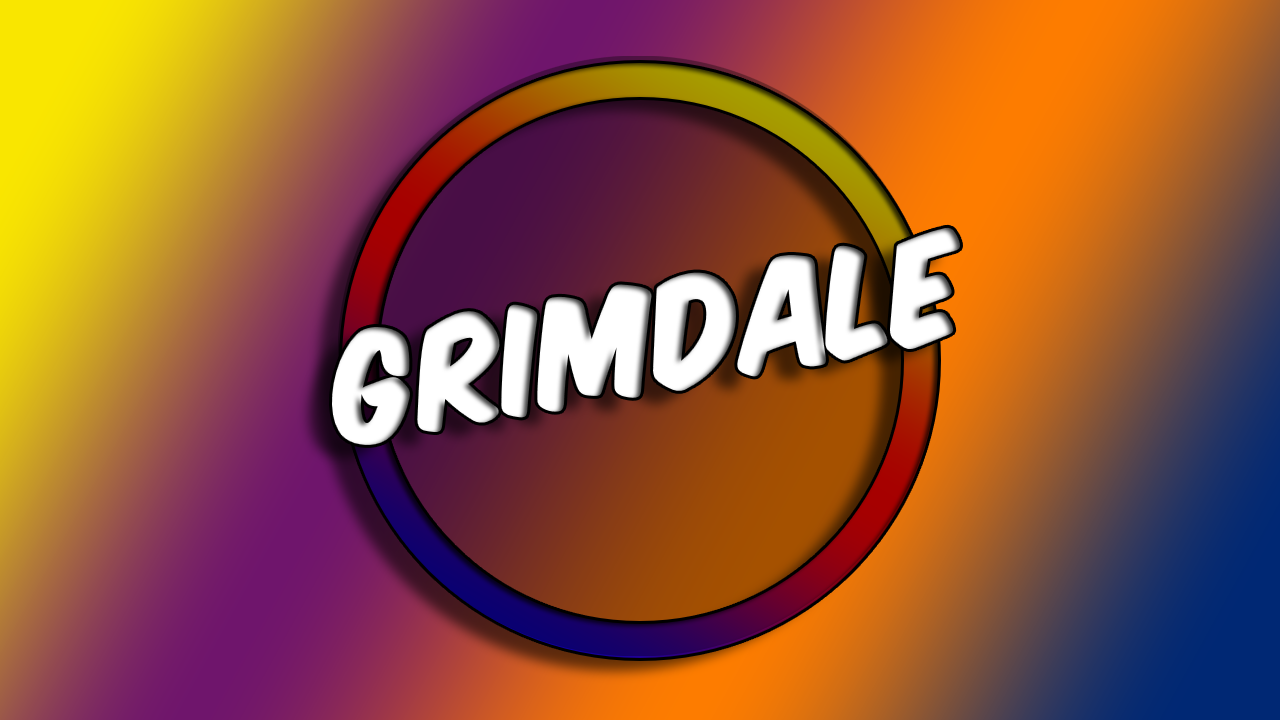
<style>
.page{position:relative;width:1280px;height:720px}
.page>*{position:absolute;margin:0}
.t1{font:121px "KomikaTitle-Paint";color:#ffffff}
</style>
<div class="page">
<p class="t1" style="left:332px;top:227px;width:628px;height:218px;rotate:-10deg">GRIMDALE</p>
</div>
